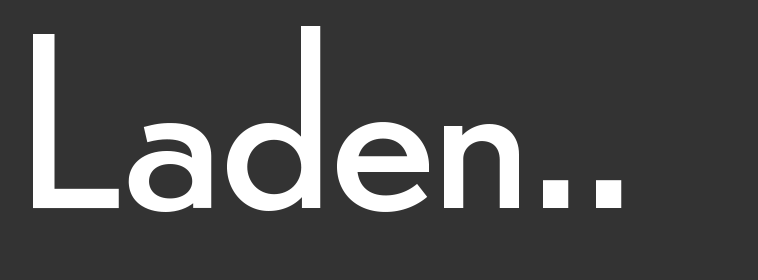
<style>
.page{position:relative;width:758px;height:280px;background:#333333}
.page>*{position:absolute;margin:0}
.t1{font:233.7px "DunbarLow-Book";color:#ffffff}
</style>
<div class="page">
<p class="t1" style="left:33px;top:26px;width:589px;height:186px">Laden..</p>
</div>
